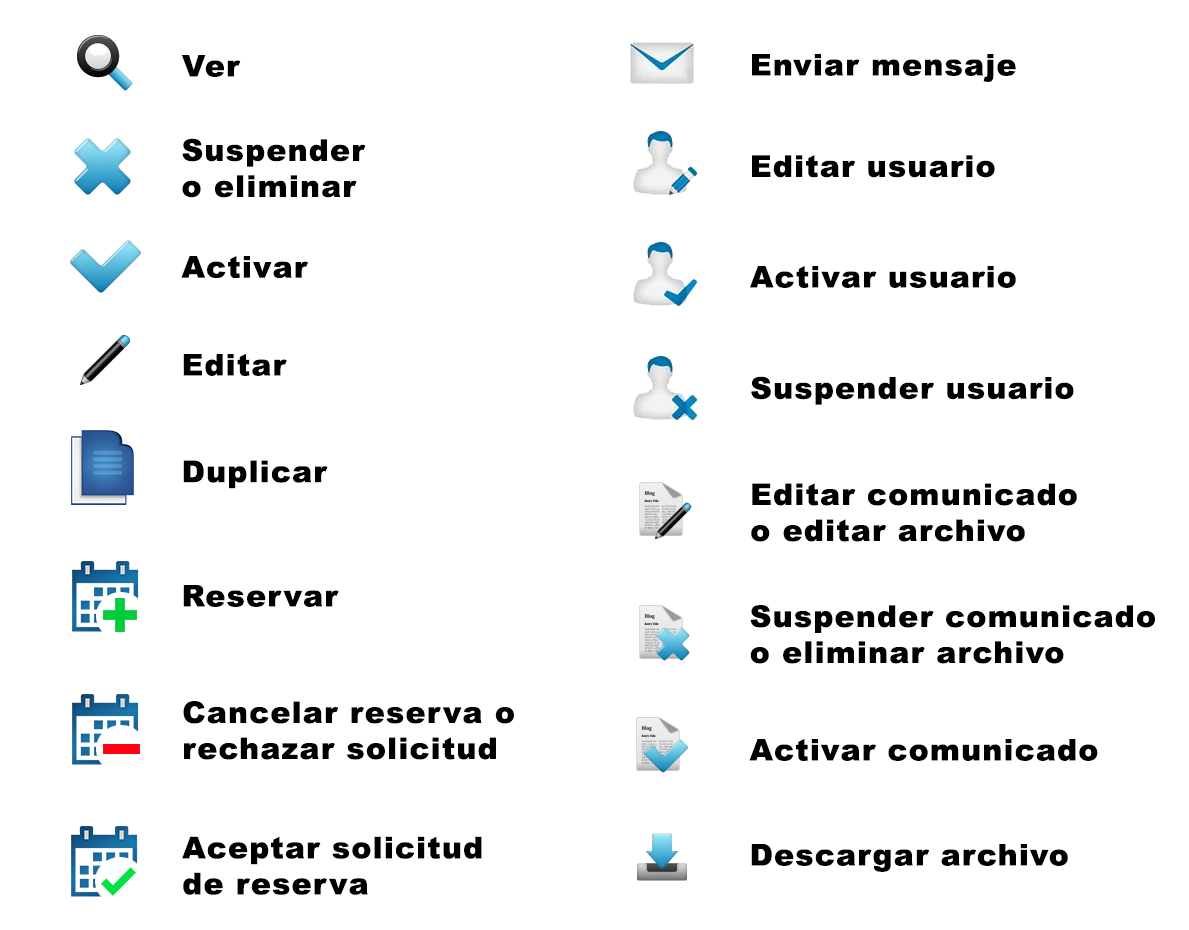
<style>
.page{position:relative;width:1189px;height:930px;background:#ffffff}
.page>*{position:absolute;margin:0}
.t1{font:30px "Arial-Black";letter-spacing:0.04em;color:#000000}
.t2{font:30px/36px "Arial-Black";letter-spacing:0.04em;color:#000000}
</style>
<div class="page">
<p class="t1" style="left:752px;top:54px;width:264px;height:28px">Enviar mensaje</p>
<p class="t1" style="left:181px;top:55px;width:60px;height:22px">Ver</p>
<p class="t2" style="left:182px;top:138px;width:184px;height:60px">Suspender<br>o eliminar</p>
<p class="t1" style="left:752px;top:155px;width:243px;height:23px">Editar usuario</p>
<p class="t1" style="left:181px;top:256px;width:127px;height:22px">Activar</p>
<p class="t1" style="left:750px;top:266px;width:266px;height:22px">Activar usuario</p>
<p class="t1" style="left:183px;top:354px;width:104px;height:22px">Editar</p>
<p class="t1" style="left:751px;top:376px;width:323px;height:29px">Suspender usuario</p>
<p class="t1" style="left:183px;top:460px;width:145px;height:29px">Duplicar</p>
<p class="t2" style="left:751px;top:483px;width:326px;height:59px">Editar comunicado<br>o editar archivo</p>
<p class="t1" style="left:183px;top:585px;width:156px;height:22px">Reservar</p>
<p class="t2" style="left:750px;top:605px;width:405px;height:59px">Suspender comunicado<br>o eliminar archivo</p>
<p class="t2" style="left:183px;top:701px;width:331px;height:59px">Cancelar reserva o<br>rechazar solicitud</p>
<p class="t1" style="left:749px;top:739px;width:349px;height:22px">Activar comunicado</p>
<p class="t2" style="left:182px;top:836px;width:300px;height:59px">Aceptar solicitud<br>de reserva</p>
<p class="t1" style="left:751px;top:844px;width:317px;height:28px">Descargar archivo</p>
</div>
